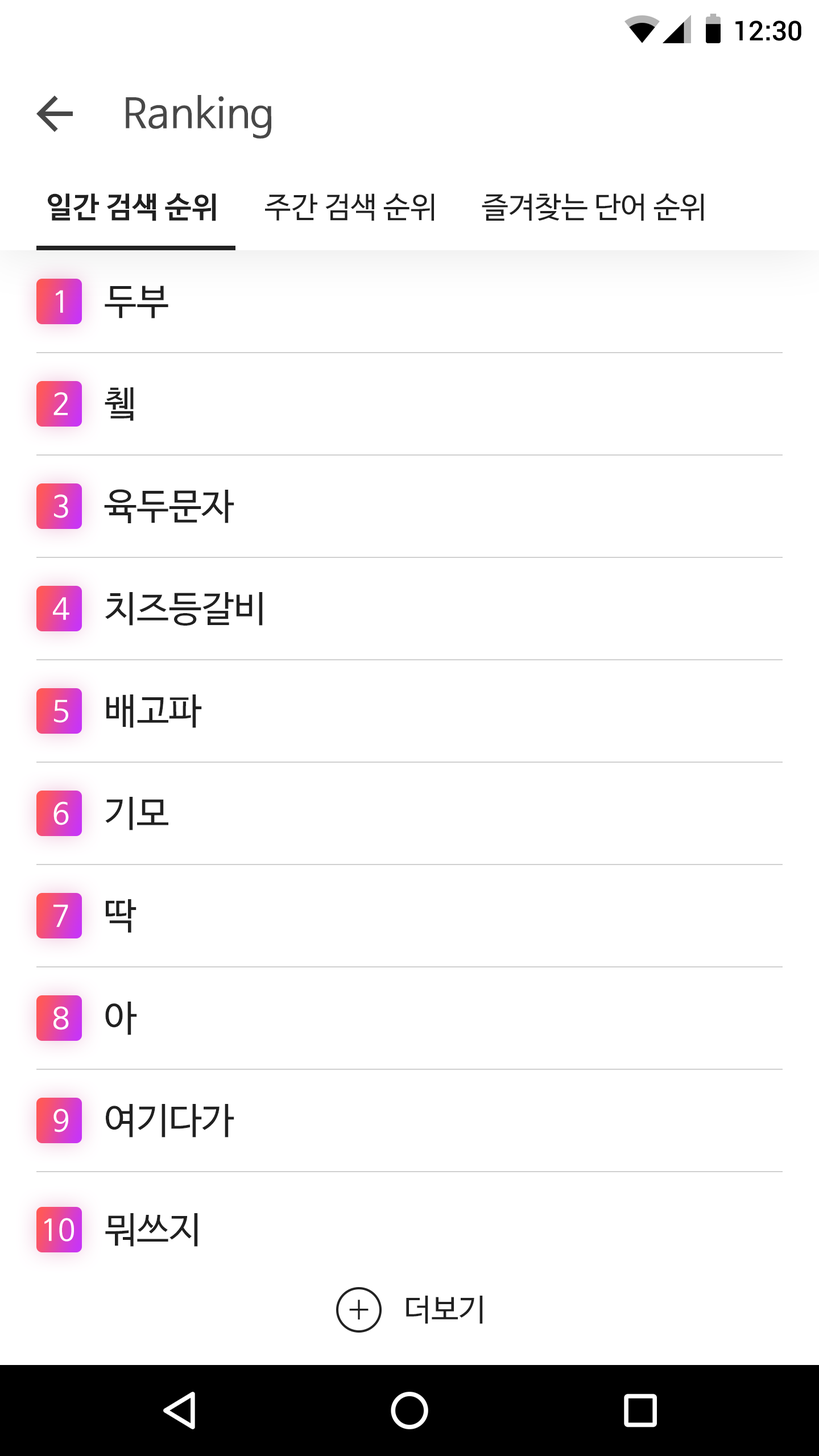
<style>
.page{position:relative;width:819px;height:1456px;background:#ffffff}
.page>*{position:absolute;margin:0}
.t1{font:27.3px "Roboto-Medium";color:#000000}
.t2{font:40.9px "NanumBarunGothic";color:#484848}
.t3{font:29.6px "NanumBarunGothicBold";color:#202020}
.t4{font:29.6px "NanumBarunGothic";color:#202020}
.t5{font:29.6px "NanumBarunGothic";color:#ffffff}
.t6{font:36.4px "NanumBarunGothic";color:#202020}
.t7{font:40.9px "NanumBarunGothicLight";color:#202020}
.t8{font:30.7px "NanumBarunGothic";color:#202020}
</style>
<div class="page">
<p class="t1" style="left:735px;top:20px;width:66px;height:21px">12:30</p>
<p class="t2" style="left:126px;top:95px;width:145px;height:44px">Ranking</p>
<p class="t3" style="left:48px;top:193px;width:168px;height:28px">일간 검색 순위</p>
<p class="t4" style="left:265px;top:193px;width:169px;height:28px">주간 검색 순위</p>
<p class="t4" style="left:482px;top:193px;width:222px;height:28px">즐겨찾는 단어 순위</p>
<p class="t5" style="left:56px;top:290px;width:7px;height:23px">1</p>
<p class="t6" style="left:105px;top:286px;width:63px;height:32px">두부</p>
<p class="t6" style="left:105px;top:387px;width:29px;height:34px">췤</p>
<p class="t5" style="left:53px;top:392px;width:15px;height:23px">2</p>
<p class="t5" style="left:54px;top:494px;width:14px;height:24px">3</p>
<p class="t6" style="left:104px;top:489px;width:130px;height:34px">육두문자</p>
<p class="t6" style="left:105px;top:592px;width:158px;height:34px">치즈등갈비</p>
<p class="t5" style="left:53px;top:597px;width:16px;height:23px">4</p>
<p class="t5" style="left:54px;top:700px;width:14px;height:23px">5</p>
<p class="t6" style="left:106px;top:694px;width:96px;height:34px">배고파</p>
<p class="t6" style="left:105px;top:797px;width:63px;height:33px">기모</p>
<p class="t5" style="left:53px;top:801px;width:16px;height:24px">6</p>
<p class="t5" style="left:53px;top:904px;width:15px;height:23px">7</p>
<p class="t6" style="left:106px;top:899px;width:30px;height:34px">딱</p>
<p class="t6" style="left:105px;top:1002px;width:32px;height:33px">아</p>
<p class="t5" style="left:53px;top:1006px;width:16px;height:24px">8</p>
<p class="t5" style="left:53px;top:1108px;width:15px;height:24px">9</p>
<p class="t6" style="left:106px;top:1104px;width:128px;height:33px">여기다가</p>
<p class="t5" style="left:44px;top:1218px;width:30px;height:24px">10</p>
<p class="t6" style="left:105px;top:1213px;width:93px;height:34px">뭐쓰지</p>
<p class="t7" style="left:349px;top:1300px;width:20px;height:19px">+</p>
<p class="t8" style="left:406px;top:1296px;width:77px;height:28px">더보기</p>
</div>
